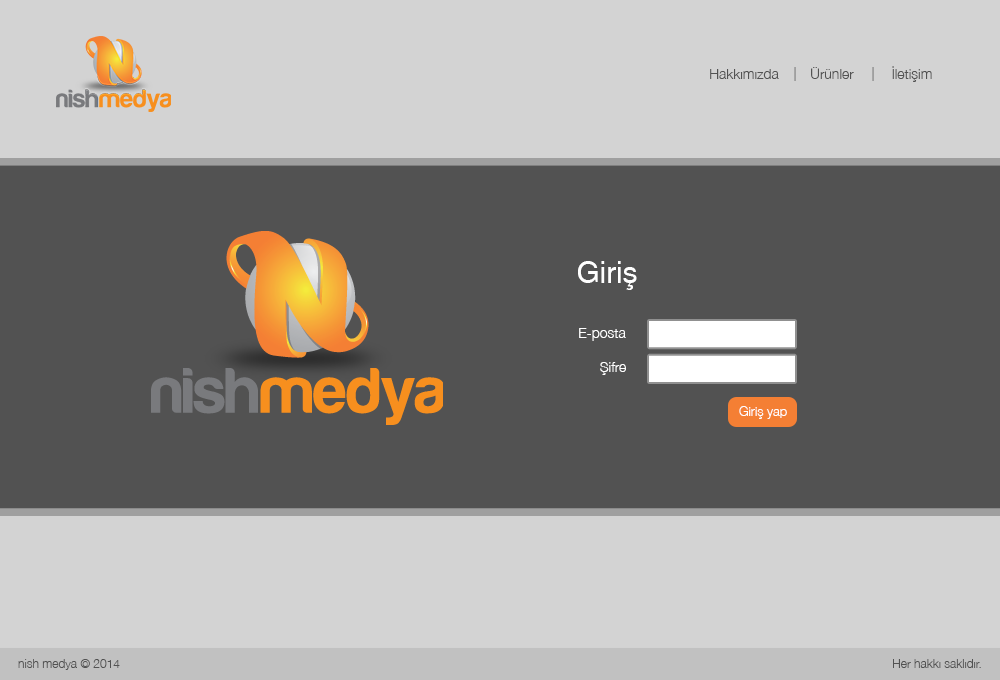
<style>
.page{position:relative;width:1000px;height:680px;background:#525252}
.page>*{position:absolute;margin:0}
.t1{font:14px "HelveticaNeue-Light";color:#525252}
.t2{font:14px "HelveticaNeue-Light"}
.t3{font:30px "Helvetica";color:#ffffff}
.t4{font:14px "HelveticaNeue-Light";color:#ffffff}
.t5{font:13px "HelveticaNeue-Light";color:#ffffff}
.t6{font:12px "HelveticaNeue-Light";color:#525252}
</style>
<div class="page">
<p class="t1" style="left:710px;top:69px;width:69px;height:10px">Hakkımızda</p>
<p class="t2" style="left:794px;top:67px;width:2px;height:14px">|</p>
<p class="t1" style="left:811px;top:67px;width:43px;height:12px">Ürünler</p>
<p class="t2" style="left:872px;top:67px;width:2px;height:14px">|</p>
<p class="t1" style="left:892px;top:66px;width:40px;height:16px">İletişim</p>
<p class="t3" style="left:578px;top:261px;width:59px;height:29px">Giriş</p>
<p class="t4" style="left:579px;top:328px;width:47px;height:13px">E-posta</p>
<p class="t4" style="left:600px;top:362px;width:26px;height:13px">Şifre</p>
<p class="t5" style="left:739px;top:406px;width:48px;height:13px">Giriş yap</p>
<p class="t6" style="left:18px;top:659px;width:102px;height:11px">nish medya © 2014</p>
<p class="t6" style="left:893px;top:659px;width:88px;height:9px">Her hakkı saklıdır.</p>
</div>
